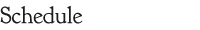
<style>
.page{position:relative;width:200px;height:30px;background:#ffffff}
.page>*{position:absolute;margin:0}
.t1{font:24px "GoudyBookletter1911";color:#1d1b1b}
</style>
<div class="page">
<p class="t1" style="left:0px;top:5px;width:83px;height:19px">Schedule</p>
</div>
